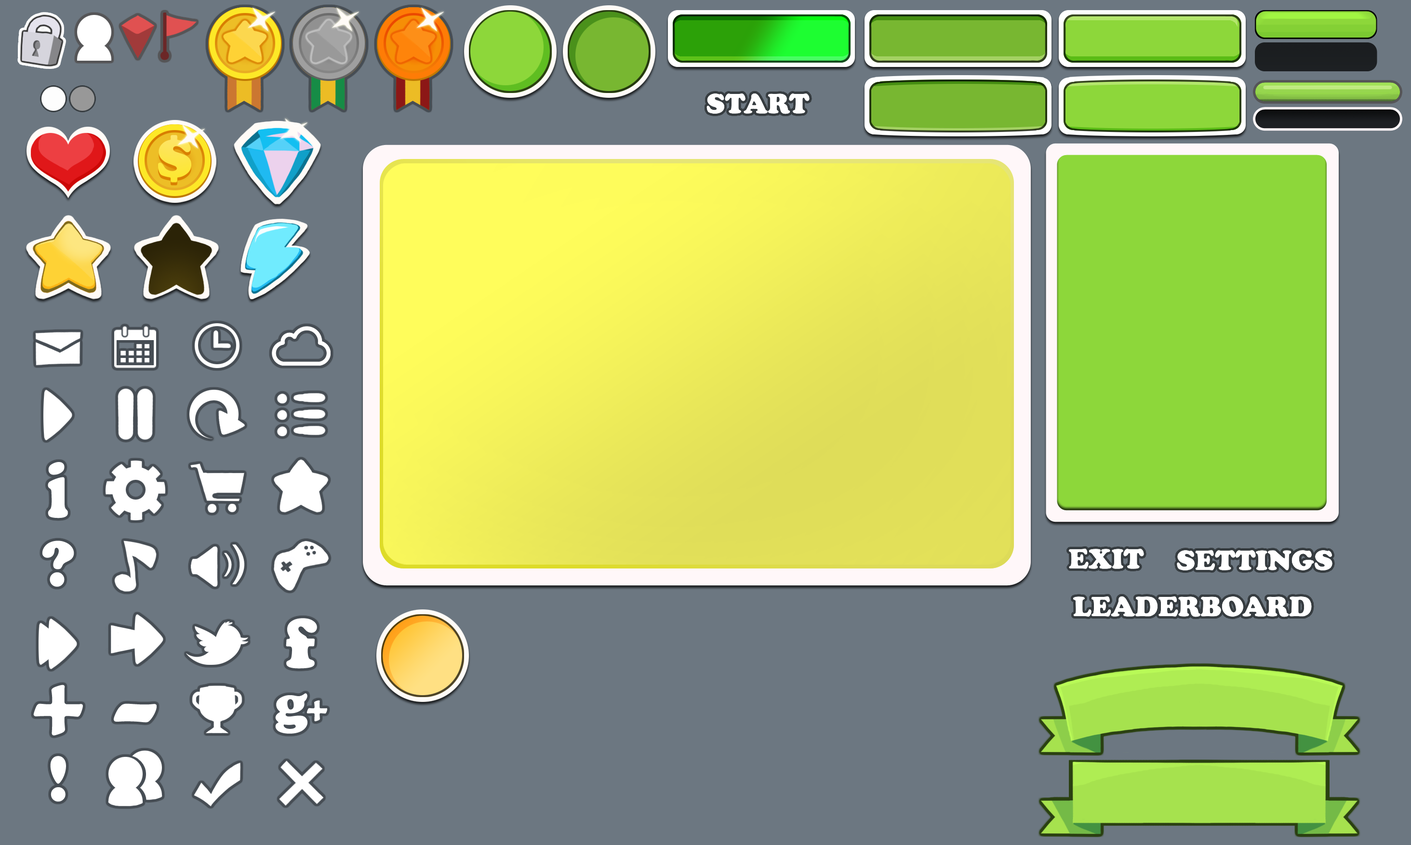
<style>
.page{position:relative;width:1411px;height:845px;background:#6c7781}
.page>*{position:absolute;margin:0}
.t1{font:28.9px "CooperBlack";color:#ffffff}
.t2{font:82.6px "CooperBlack";color:#ffffff;scale:0.71 1}
.t3{font:67.5px "CooperBlack";color:#ffffff}
.t4{font:73.4px "CooperBlack";letter-spacing:0.025em;color:#ffffff}
.t5{font:102.2px "CooperBlack";letter-spacing:0.025em;color:#ffffff}
.t6{font:102.2px "CooperBlack";letter-spacing:0.025em;color:#ffffff;scale:1.47 1}
</style>
<div class="page">
<p class="t1" style="left:706px;top:93px;width:104px;height:21px">START</p>
<p class="t2" style="left:48px;top:462px;width:20px;height:56px">i</p>
<p class="t3" style="left:42px;top:541px;width:32px;height:46px">?</p>
<p class="t1" style="left:1069px;top:548px;width:75px;height:21px">EXIT</p>
<p class="t1" style="left:1177px;top:550px;width:155px;height:21px">SETTINGS</p>
<p class="t1" style="left:1073px;top:596px;width:239px;height:21px">LEADERBOARD</p>
<p class="t4" style="left:286px;top:618px;width:31px;height:51px">f</p>
<p class="t5" style="left:33px;top:685px;width:50px;height:51px">+</p>
<p class="t6" style="left:114px;top:704px;width:43px;height:19px">-</p>
<p class="t3" style="left:50px;top:756px;width:16px;height:46px">!</p>
</div>
